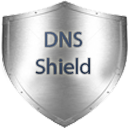
<style>
.page{position:relative;width:128px;height:128px;background:#ffffff}
.page>*{position:absolute;margin:0}
.t1{font:22px "MyriadPro-Regular";color:#30415c}
</style>
<div class="page">
<p class="t1" style="left:35px;top:32px;width:56px;height:42px;text-align:center">DNS<br>Shield</p>
</div>
